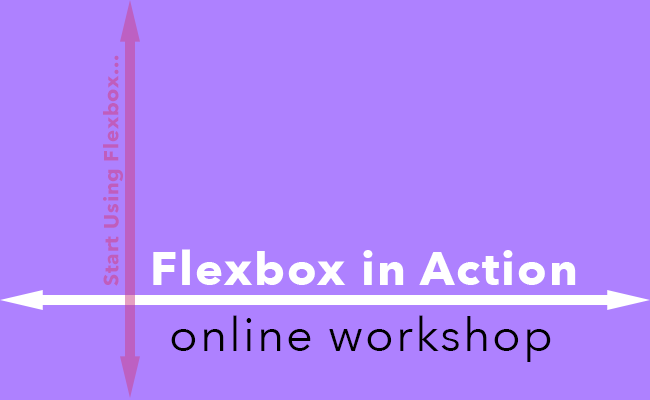
<style>
.page{position:relative;width:650px;height:400px;background:#ae81ff}
.page>*{position:absolute;margin:0}
.t1{font:20.1px "AvenirNext-Bold";letter-spacing:0.04em;color:#c05dbc}
.t2{font:47px "AvenirNext-Bold";letter-spacing:0.04em;color:#ffffff}
.t3{font:47px "AvenirNext-Regular";letter-spacing:0.04em;color:#000000}
</style>
<div class="page">
<p class="t1" style="left:103px;top:55px;width:20px;height:231px;rotate:-90deg">Start Using Flexbox...</p>
<p class="t2" style="left:153px;top:249px;width:423px;height:36px">Flexbox in Action</p>
<p class="t3" style="left:171px;top:315px;width:380px;height:47px">online workshop</p>
</div>
